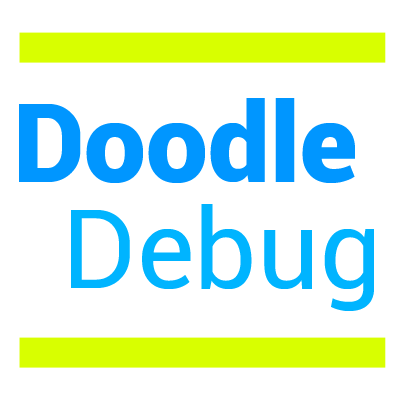
<style>
.page{position:relative;width:400px;height:400px;background:#ffffff}
.page>*{position:absolute;margin:0}
.t1{font:110px "Roboto-Black";color:#0096ff}
.t2{font:110px "Roboto-Regular";color:#00b4ff}
</style>
<div class="page">
<p class="t1" style="left:19px;top:98px;width:336px;height:85px">Doodle</p>
<p class="t2" style="left:71px;top:204px;width:303px;height:107px">Debug</p>
</div>
